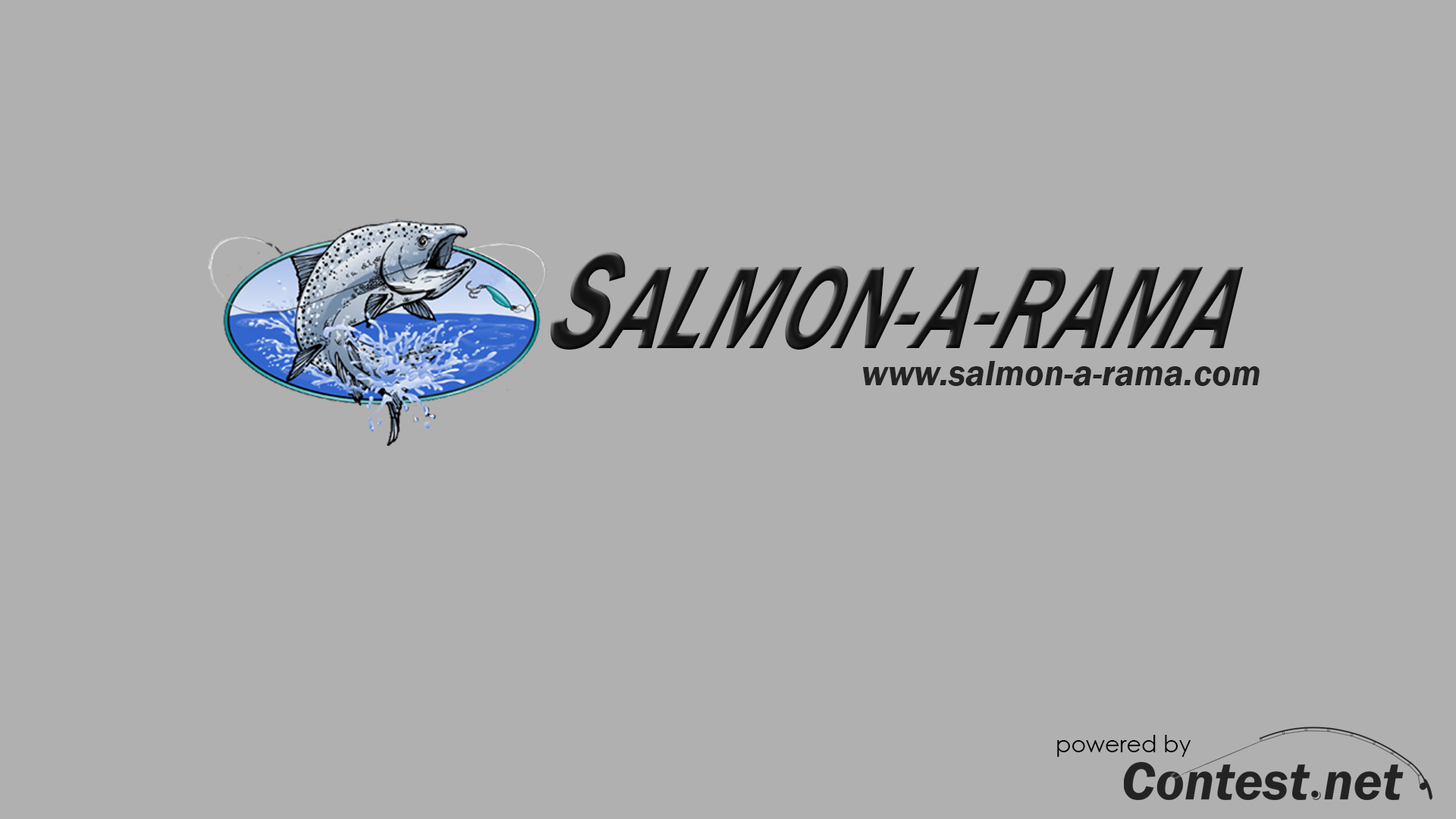
<style>
.page{position:relative;width:1456px;height:819px;background:#b0b0b0}
.page>*{position:absolute;margin:0}
.t1{font:128.9px "FranklinGothic-DemiItalic";color:#232323;scale:0.68 1}
.t2{font:151.7px "FranklinGothic-DemiItalic";color:#232323;scale:0.68 1}
.t3{font:36.4px "FranklinGothic-DemiItalic";color:#232323}
.t4{font:22.7px "CenturyGothic";color:#000000}
</style>
<div class="page">
<p class="t1" style="left:550px;top:252px;width:694px;height:98px"><span class="t2">S</span>ALMON-A-RAMA</p>
<p class="t3" style="left:862px;top:361px;width:398px;height:25px">www.salmon-a-rama.com</p>
<p class="t4" style="left:1057px;top:735px;width:134px;height:22px">powered by</p>
</div>
